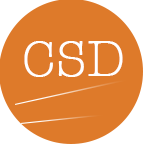
<style>
.page{position:relative;width:144px;height:144px;background:#de7a2a}
.page>*{position:absolute;margin:0}
.t1{font:50.2px "AmericanTypewriter-Light";letter-spacing:0.01em;color:#ffffff;font-variant:small-caps;font-weight:bold}
</style>
<div class="page">
<p class="t1" style="left:24px;top:41px;width:99px;height:36px">CSD</p>
</div>
